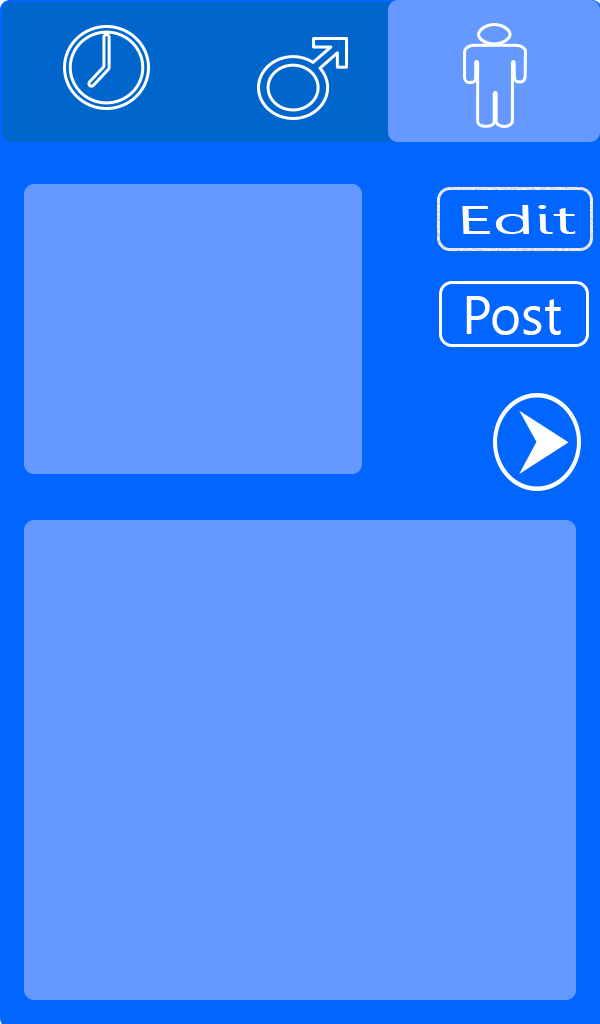
<style>
.page{position:relative;width:600px;height:1024px;background:#6699ff}
.page>*{position:absolute;margin:0}
.t1{font:38.5px "Leelawadee";color:#ffffff;scale:1.85 1}
.t2{font:53.6px "Leelawadee";color:#ffffff}
</style>
<div class="page">
<p class="t1" style="left:462px;top:205px;width:114px;height:29px">Edit</p>
<p class="t2" style="left:466px;top:296px;width:95px;height:39px">Post</p>
</div>
